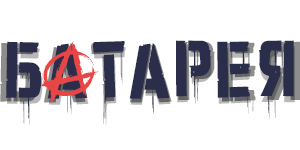
<style>
.page{position:relative;width:300px;height:150px;background:#ffffff}
.page>*{position:absolute;margin:0}
.t1{font:81px "RussianPunk"}
.t2{font:77.2px "RussianPunk";color:#2b2e4a}
.t3{font:91.6px "Anarchaos";color:#e84545}
.t4{font:77.2px "RussianPunk"}
</style>
<div class="page">
<p class="t1" style="left:0px;top:41px;width:302px;height:83px">Батарея</p>
<p class="t2" style="left:6px;top:40px;width:288px;height:79px">Батарея</p>
<p class="t3" style="left:41px;top:41px;width:58px;height:62px;rotate:-17deg">A</p>
<p class="t4" style="left:7px;top:46px;width:288px;height:79px">Батарея</p>
</div>
